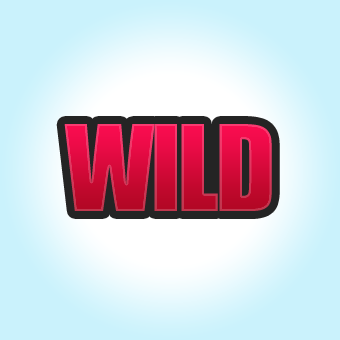
<style>
.page{position:relative;width:340px;height:340px;background:#caf2fc}
.page>*{position:absolute;margin:0}
.t1{font:110px "Impact";letter-spacing:-0.04em}
</style>
<div class="page">
<p class="t1" style="left:0px;top:124px;width:340px;height:119px">WILD</p>
</div>
